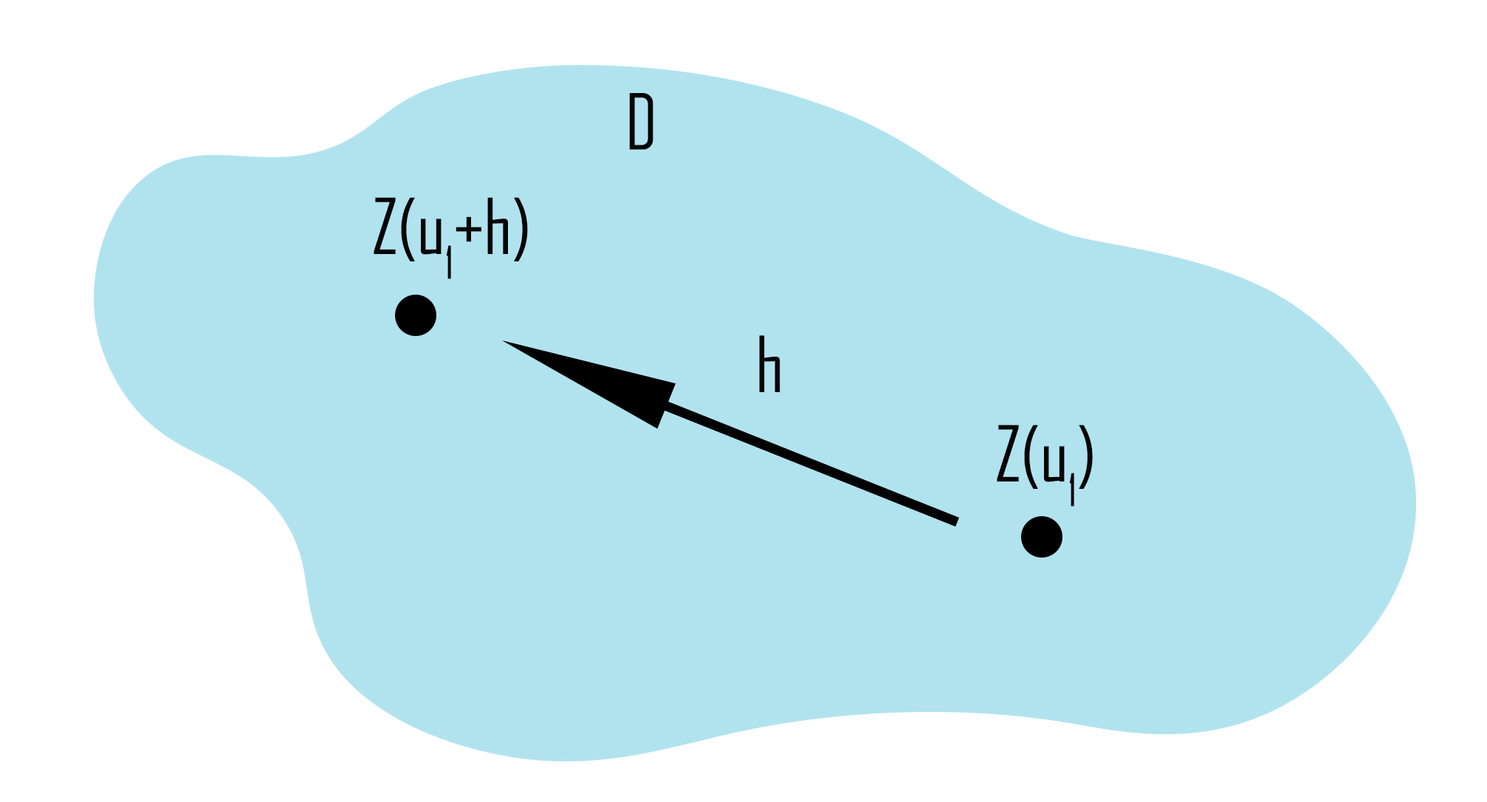
<style>
.page{position:relative;width:1487px;height:802px;background:#b1e3ef}
.page>*{position:absolute;margin:0}
.t1{font:73.8px "AgencyFB-Reg";color:#040404}
</style>
<div class="page">
<p class="t1" style="left:629px;top:93px;width:24px;height:57px">D</p>
<p class="t1" style="left:374px;top:197px;width:154px;height:82px">Z(u1+h)</p>
<p class="t1" style="left:759px;top:335px;width:21px;height:57px">h</p>
<p class="t1" style="left:997px;top:425px;width:96px;height:82px">Z(u1)</p>
</div>
